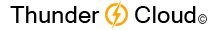
<style>
.page{position:relative;width:222px;height:30px;background:#ffffff}
.page>*{position:absolute;margin:0}
.t1{font:24px "MicrosoftSansSerif";color:#000000}
</style>
<div class="page">
<p class="t1" style="left:10px;top:6px;width:90px;height:17px">Thunder</p>
<p class="t1" style="left:135px;top:6px;width:61px;height:17px">Cloud</p>
</div>
